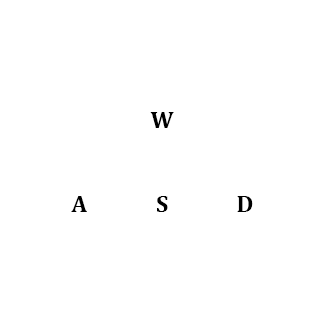
<style>
.page{position:relative;width:324px;height:324px;background:#ffffff}
.page>*{position:absolute;margin:0}
.t1{font:24px "Cambria-Bold";color:#000000}
</style>
<div class="page">
<p class="t1" style="left:150px;top:112px;width:24px;height:16px">W</p>
<p class="t1" style="left:71px;top:196px;width:16px;height:16px">A</p>
<p class="t1" style="left:157px;top:196px;width:11px;height:16px">S</p>
<p class="t1" style="left:237px;top:196px;width:16px;height:16px">D</p>
</div>
